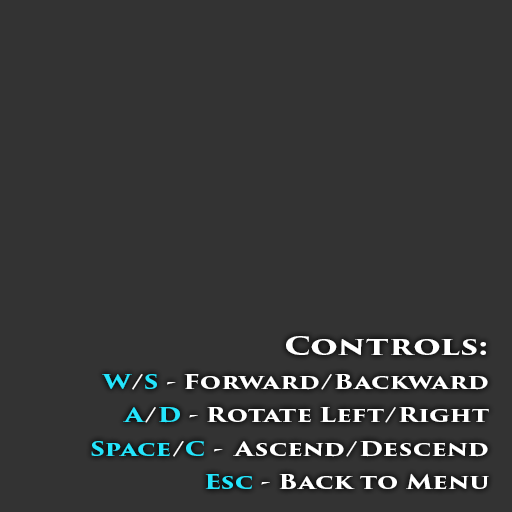
<style>
.page{position:relative;width:512px;height:512px;background:#333333}
.page>*{position:absolute;margin:0}
.t1{font:19.6px "TrajanPro3-Bold";color:#fefefe;scale:1.29 1}
.t2{font:25.2px "TrajanPro3-Bold";color:#ffffff;scale:1.29 1}
.t3{font:19.6px "TrajanPro3-Bold";color:#24e5fc;scale:1.29 1}
.t4{font:19.6px "TrajanPro3-Bold";color:#ffffff;scale:1.29 1}
</style>
<div class="page">
<p class="t1" style="left:91px;top:336px;width:398px;height:153px;text-align:right"><span class="t2">Controls:<br><br></span><span class="t3">W</span><span class="t4">/</span><span class="t3">S </span><span class="t4">- Forward/Backward<br><br></span><span class="t3">A</span><span class="t4">/</span><span class="t3">D </span>- Rotate Left/Right<br><br><span class="t3">Space</span><span class="t4">/</span><span class="t3">C </span><span class="t4">-  Ascend/Descend<br><br></span><span class="t3">Esc </span><span class="t4">- Back to Menu</span></p>
</div>
